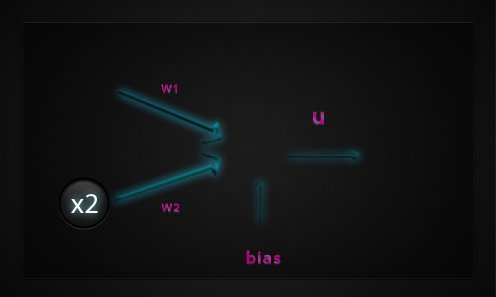
<style>
.page{position:relative;width:496px;height:297px}
.page>*{position:absolute;margin:0}
.t1{font:11px "nevis-Bold";letter-spacing:0.05em}
.t2{font:25.3px "nevis-Bold";letter-spacing:0.05em}
.t3{font:17.9px "nevis-Bold";letter-spacing:0.05em}
</style>
<div class="page">
<p class="t1" style="left:161px;top:84px;width:16px;height:9px">W1</p>
<p class="t2" style="left:313px;top:111px;width:11px;height:13px">u</p>
<p class="t1" style="left:161px;top:203px;width:19px;height:9px">W2</p>
<p class="t3" style="left:246px;top:250px;width:35px;height:14px">bias</p>
</div>
